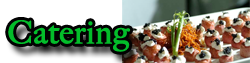
<style>
.page{position:relative;width:250px;height:63px;background:#ffffff}
.page>*{position:absolute;margin:0}
.t1{font:31.1px "BigCaslon-Medium";letter-spacing:0.01em;color:#03bd2a;font-weight:bold}
</style>
<div class="page">
<p class="t1" style="left:8px;top:20px;width:123px;height:32px">Catering</p>
</div>
